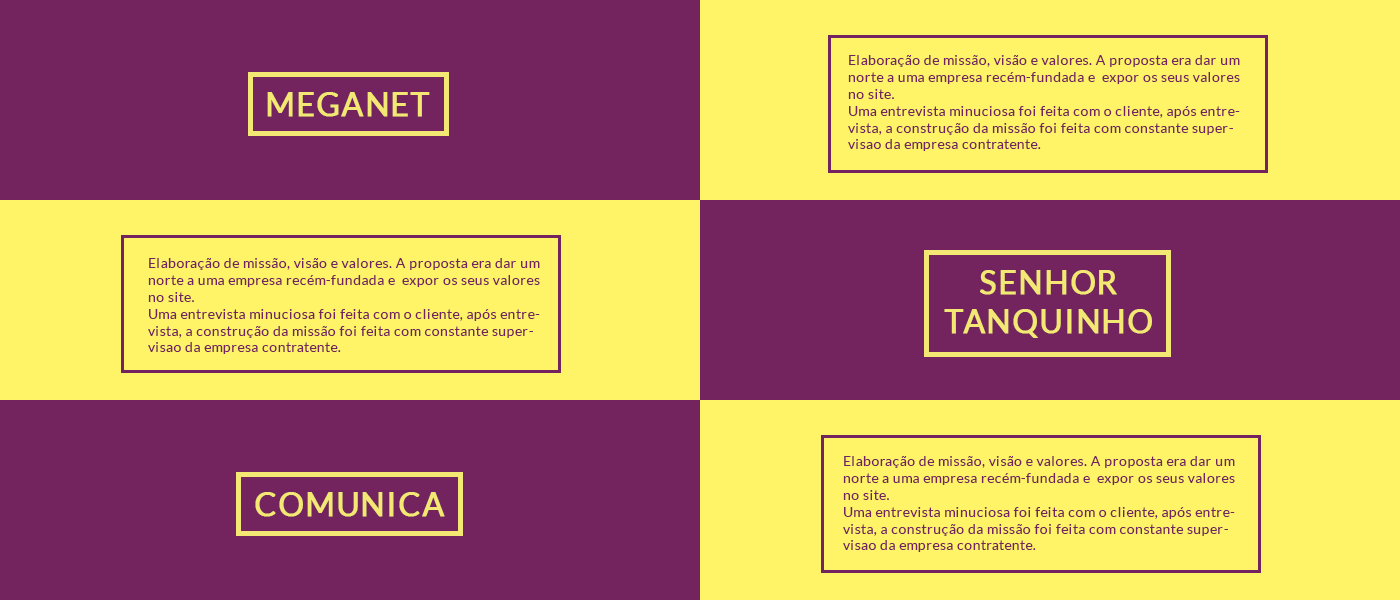
<style>
.page{position:relative;width:1400px;height:600px;background:#73235e}
.page>*{position:absolute;margin:0}
.t1{font:14px "Lato-Regular";letter-spacing:0.025em;color:#73235e}
.t2{font:32px "Lato-Regular";letter-spacing:0.025em;color:#f2e873;text-transform:uppercase;font-weight:bold}
</style>
<div class="page">
<p class="t1" style="left:848px;top:55px;width:392px;height:96px">Elaboração de missão, visão e valores. A proposta era dar um norte a uma empresa recém-fundada e  expor os seus valores no site.<br>Uma entrevista minuciosa foi feita com o cliente, após entrevista, a construção da missão foi feita com constante supervisao da empresa contratente.</p>
<p class="t2" style="left:267px;top:92px;width:163px;height:25px">MEGANET</p>
<p class="t1" style="left:148px;top:258px;width:392px;height:96px">Elaboração de missão, visão e valores. A proposta era dar um norte a uma empresa recém-fundada e  expor os seus valores no site.<br>Uma entrevista minuciosa foi feita com o cliente, após entrevista, a construção da missão foi feita com constante supervisao da empresa contratente.</p>
<p class="t2" style="left:944px;top:270px;width:208px;height:68px;text-align:center">senhor<br>tanquinho</p>
<p class="t1" style="left:843px;top:456px;width:392px;height:96px">Elaboração de missão, visão e valores. A proposta era dar um norte a uma empresa recém-fundada e  expor os seus valores no site.<br>Uma entrevista minuciosa foi feita com o cliente, após entrevista, a construção da missão foi feita com constante supervisao da empresa contratente.</p>
<p class="t2" style="left:255px;top:492px;width:190px;height:25px">comunica</p>
</div>
